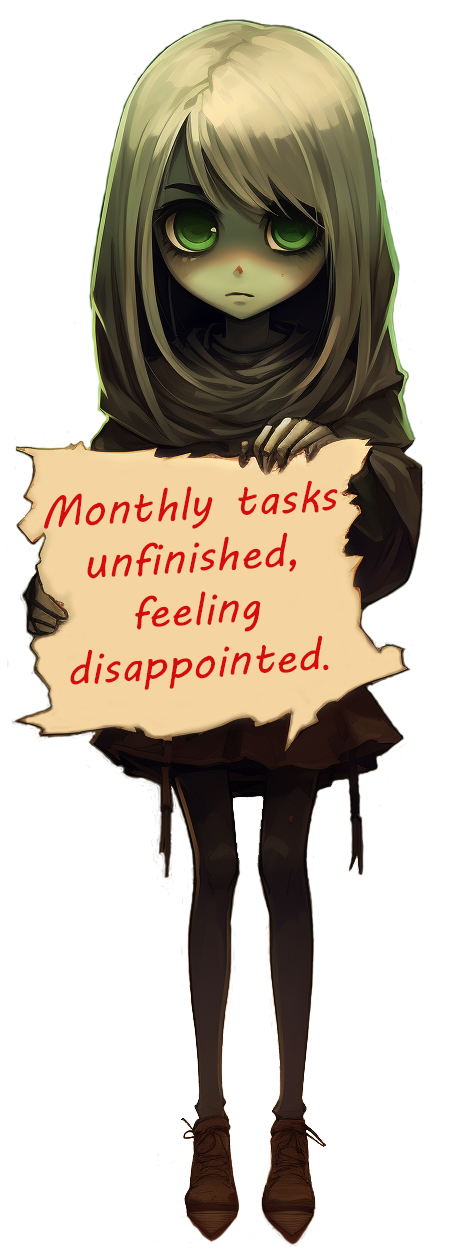
<style>
.page{position:relative;width:450px;height:1252px;background:#ffffff}
.page>*{position:absolute;margin:0}
.t1{font:44px "MVBoli";letter-spacing:0.006em;color:#d40c0c}
.t2{font:44px "MyriadPro-Regular";letter-spacing:0.006em;color:#d40c0c}
</style>
<div class="page">
<p class="t1" style="left:44px;top:480px;width:294px;height:210px;text-align:center;rotate:-3deg">Monthly tasks unfinished,<br>feeling disappointed<span class="t2">.</span></p>
</div>
